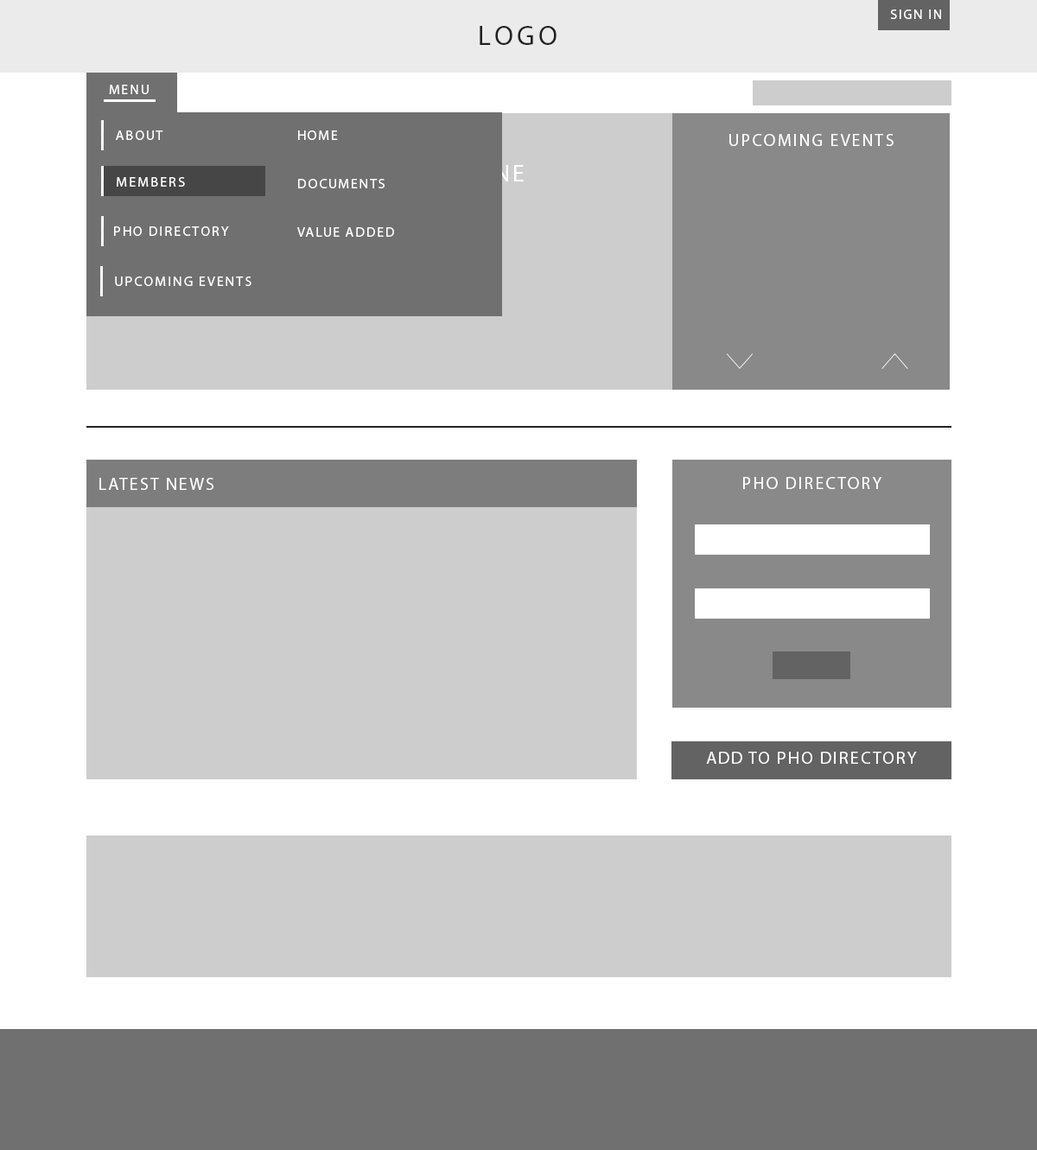
<style>
.page{position:relative;width:1037px;height:1150px;background:#ffffff}
.page>*{position:absolute;margin:0}
.t1{font:13.8px "MyriadPro-Regular";letter-spacing:0.1em;color:#ffffff;text-transform:uppercase}
.t2{font:27.6px "MyriadPro-Regular";letter-spacing:0.12em;color:#222222;text-transform:uppercase}
.t3{font:13.8px/24.2px "MyriadPro-Regular";letter-spacing:0.1em;color:#ffffff;text-transform:uppercase}
.t4{font:17.3px "MyriadPro-Regular";letter-spacing:0.1em;color:#ffffff;text-transform:uppercase}
.t5{font:13.8px "MyriadPro-Regular";letter-spacing:0.12em;color:#ffffff;text-transform:uppercase}
</style>
<div class="page">
<p class="t1" style="left:890px;top:10px;width:51px;height:9px">Sign in</p>
<p class="t2" style="left:480px;top:26px;width:76px;height:19px">LOGO</p>
<p class="t1" style="left:109px;top:85px;width:40px;height:9px">MENU</p>
<p class="t1" style="left:109px;top:85px;width:40px;height:9px">MENU</p>
<p class="t1" style="left:116px;top:130px;width:47px;height:10px">About</p>
<p class="t3" style="left:297px;top:130px;width:97px;height:107px">home<br><br>Documents<br><br>value added</p>
<p class="t4" style="left:729px;top:134px;width:164px;height:12px">Upcoming Events</p>
<p class="t5" style="left:117px;top:177px;width:68px;height:10px">Members</p>
<p class="t5" style="left:114px;top:226px;width:115px;height:10px">PHO Directory</p>
<p class="t5" style="left:115px;top:276px;width:136px;height:10px">Upcoming Events</p>
<p class="t4" style="left:99px;top:478px;width:114px;height:12px">Latest News</p>
<p class="t4" style="left:743px;top:477px;width:139px;height:12px">PHO DIRECTORY</p>
<p class="t4" style="left:706px;top:752px;width:211px;height:12px">ADD TO PHO DIRECTORY</p>
</div>
